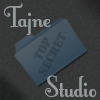
<style>
.page{position:relative;width:100px;height:100px}
.page>*{position:absolute;margin:0}
.t1{font:36px "FontleroyBrown";color:#949c9c}
</style>
<div class="page">
<p class="t1" style="left:4px;top:3px;width:47px;height:32px">Tajne</p>
<p class="t1" style="left:45px;top:75px;width:52px;height:22px">Studio</p>
</div>
